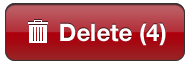
<style>
.page{position:relative;width:190px;height:65px;background:#ffffff}
.page>*{position:absolute;margin:0}
.t1{font:24px "HelveticaNeue-Bold";color:#ffffff}
</style>
<div class="page">
<p class="t1" style="left:60px;top:23px;width:106px;height:23px">Delete (4)</p>
<p class="t1" style="left:60px;top:23px;width:106px;height:23px">Delete (4)</p>
</div>
